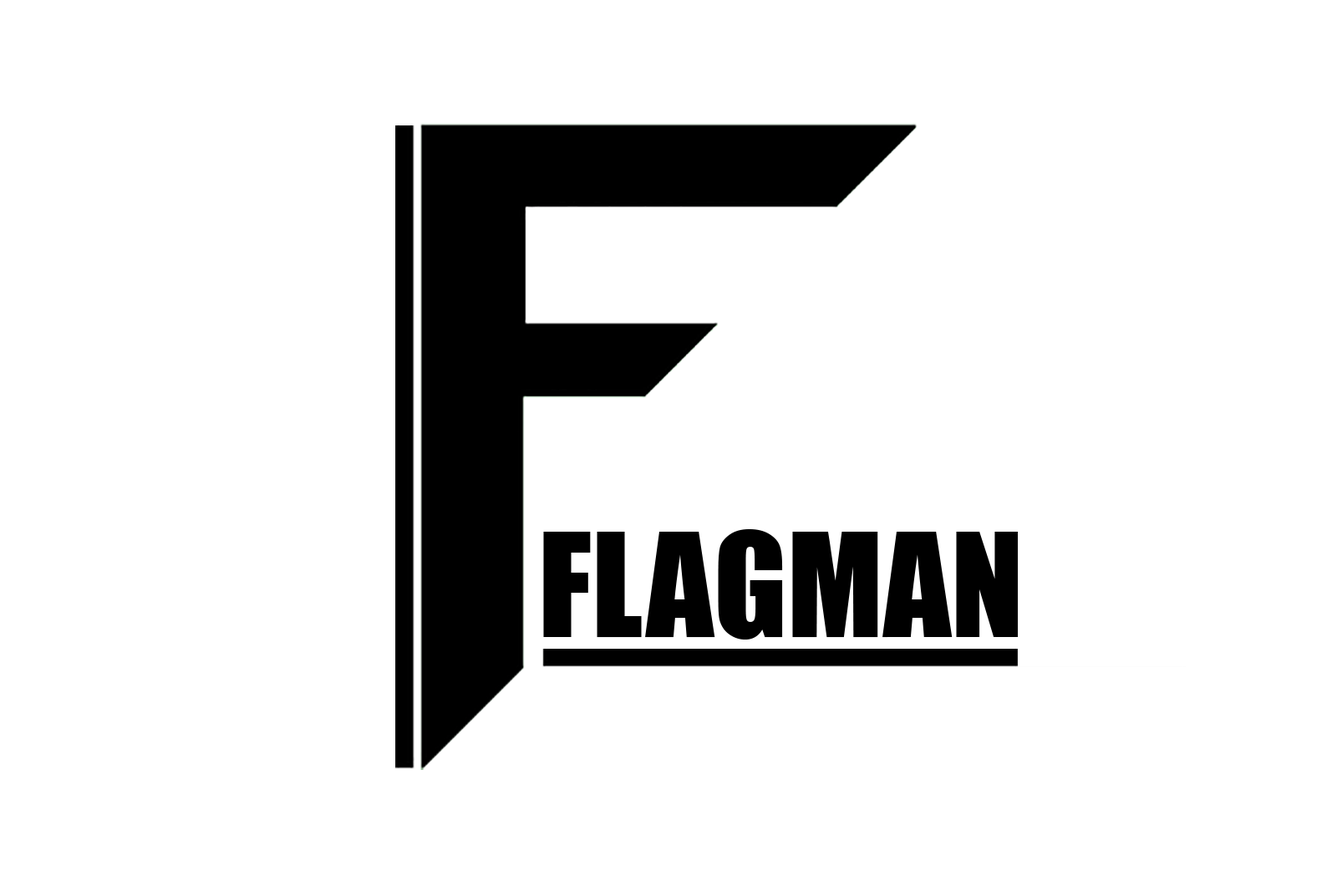
<style>
.page{position:relative;width:1337px;height:892px;background:#ffffff}
.page>*{position:absolute;margin:0}
.t1{font:133.8px "Impact";color:#000000}
</style>
<div class="page">
<p class="t1" style="left:543px;top:529px;width:475px;height:110px">FLAGMAN</p>
</div>
